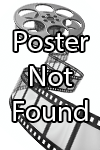
<style>
.page{position:relative;width:100px;height:150px}
.page>*{position:absolute;margin:0}
.t1{font:29.2px "MyriadPro-Regular";color:#ffffff}
</style>
<div class="page">
<p class="t1" style="left:13px;top:31px;width:75px;height:90px;text-align:center">Poster<br>Not<br>Found</p>
</div>
